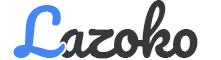
<style>
.page{position:relative;width:221px;height:60px;background:#ffffff}
.page>*{position:absolute;margin:0}
.t1{font:61px "Pacifico-Regular";color:#37383b}
.t2{font:61px "Pacifico-Regular";color:#4386f4}
</style>
<div class="page">
<p class="t1" style="left:13px;top:0px;width:185px;height:59px">Lazoko</p>
<p class="t2" style="left:13px;top:5px;width:52px;height:53px">L</p>
</div>
